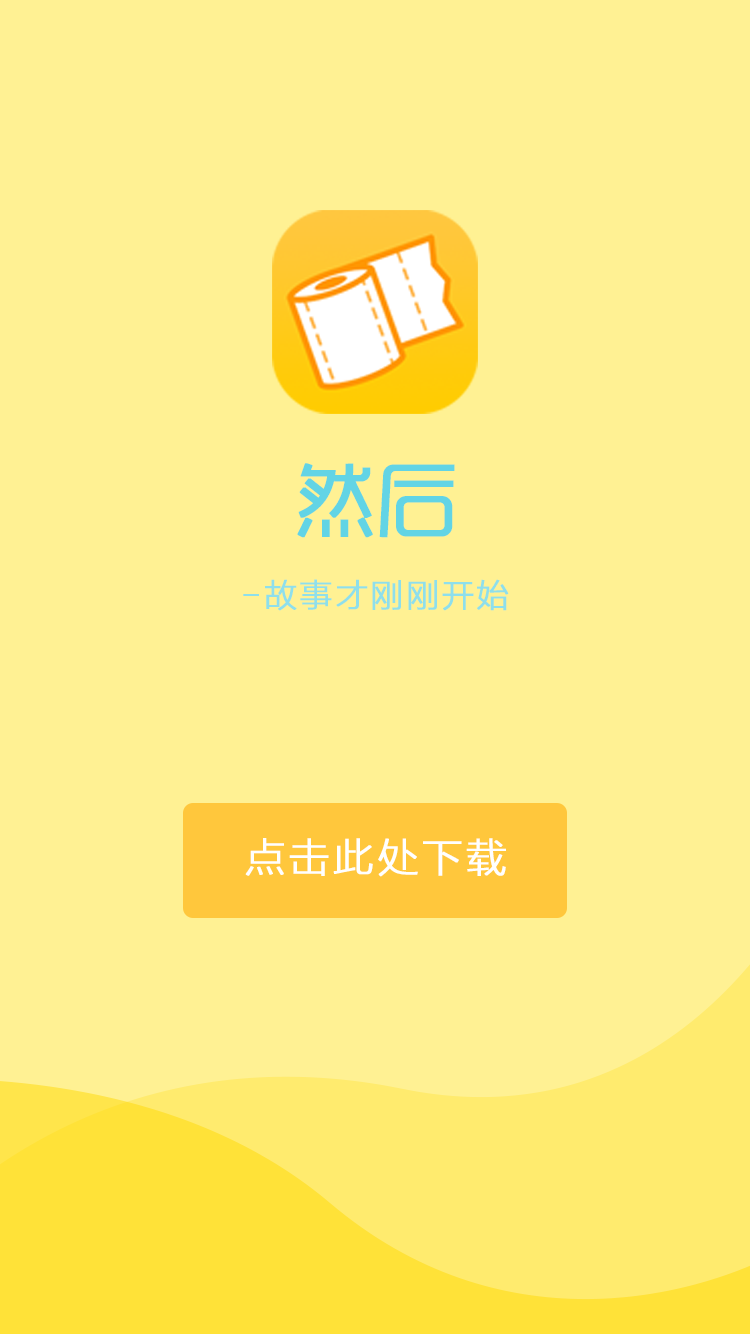
<style>
.page{position:relative;width:750px;height:1334px;background:#fff193}
.page>*{position:absolute;margin:0}
.t1{font:80px "RTWSYueGoTrial-Regular";color:#62d4e5;font-weight:bold}
.t2{font:32px "STHeitiSC-Light";color:#8edfeb;font-weight:bold}
.t3{font:40px "STHeitiSC-Light";color:#ffffff;font-weight:bold}
</style>
<div class="page">
<p class="t1" style="left:297px;top:463px;width:158px;height:75px">然后</p>
<p class="t2" style="left:243px;top:579px;width:266px;height:32px">-故事才刚刚开始</p>
<p class="t3" style="left:245px;top:838px;width:261px;height:39px">点击此处下载</p>
</div>
